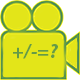
<style>
.page{position:relative;width:80px;height:80px;background:#e3e519}
.page>*{position:absolute;margin:0}
.t1{font:20px "MyriadPro-BoldIt";color:#659b46}
</style>
<div class="page">
<p class="t1" style="left:13px;top:44px;width:45px;height:15px">+/-=?</p>
</div>
